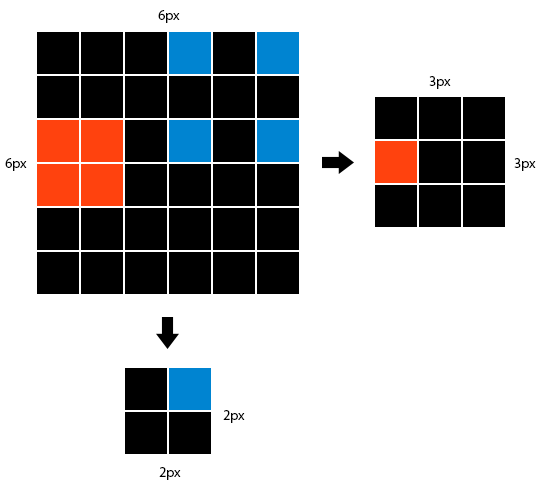
<style>
.page{position:relative;width:545px;height:488px;background:#ffffff}
.page>*{position:absolute;margin:0}
.t1{font:14px "MyriadPro-Regular";color:#000000}
</style>
<div class="page">
<p class="t1" style="left:158px;top:10px;width:22px;height:13px">6px</p>
<p class="t1" style="left:429px;top:76px;width:22px;height:13px">3px</p>
<p class="t1" style="left:5px;top:158px;width:22px;height:13px">6px</p>
<p class="t1" style="left:514px;top:158px;width:22px;height:13px">3px</p>
<p class="t1" style="left:223px;top:410px;width:22px;height:13px">2px</p>
<p class="t1" style="left:159px;top:467px;width:22px;height:13px">2px</p>
</div>
